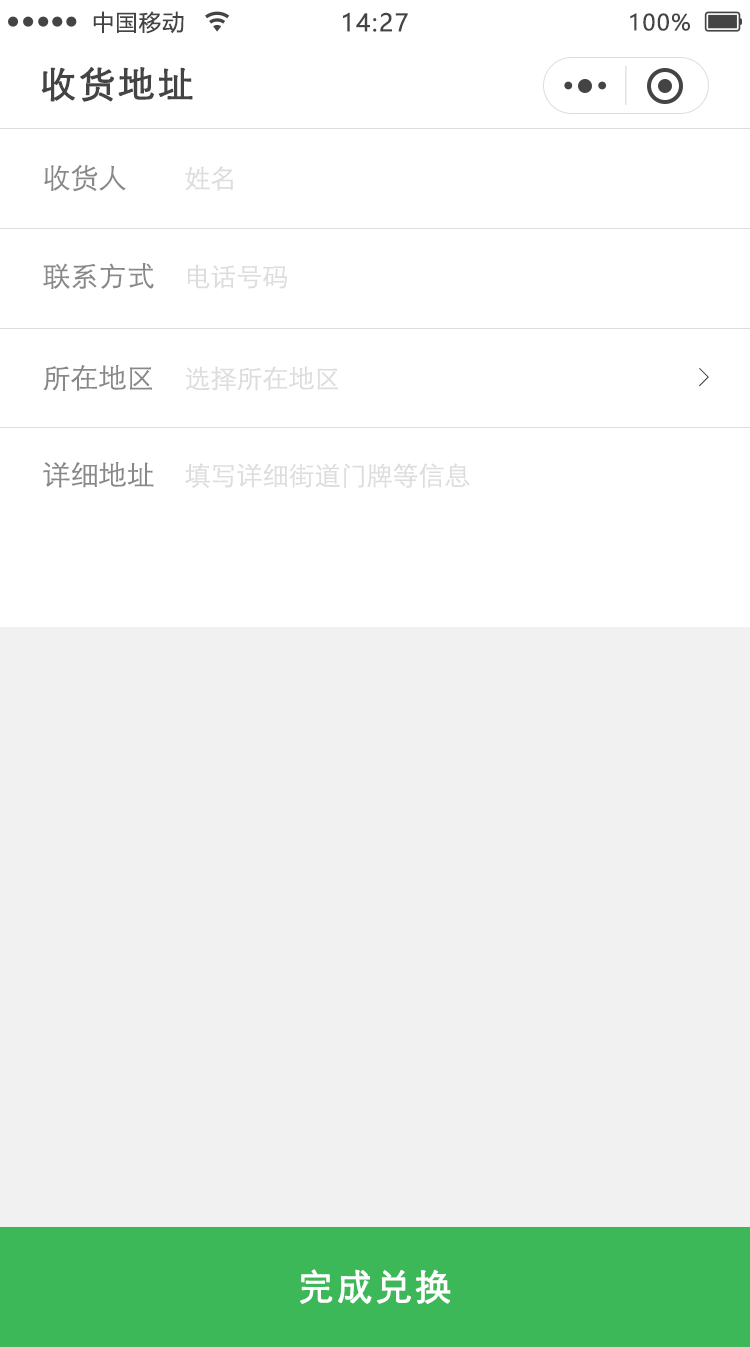
<style>
.page{position:relative;width:750px;height:1347px;background:#ffffff}
.page>*{position:absolute;margin:0}
.t1{font:22px "MicrosoftYaHei";letter-spacing:0.06em;color:#444444}
.t2{font:24px "MicrosoftYaHei";letter-spacing:0.06em;color:#444444}
.t3{font:36px "STXihei";letter-spacing:0.06em;color:#444444;font-weight:bold}
.t4{font:28px "STXihei";color:#888888}
.t5{font:26px "STXihei";color:#dddddd}
.t6{font:26px "SimSun";color:#444444}
.t7{font:36px "STXihei";letter-spacing:0.06em;color:#ffffff;font-weight:bold}
</style>
<div class="page">
<p class="t1" style="left:93px;top:11px;width:91px;height:23px">中国移动</p>
<p class="t2" style="left:343px;top:12px;width:65px;height:20px">14:27</p>
<p class="t1" style="left:630px;top:13px;width:60px;height:18px">100%</p>
<p class="t3" style="left:41px;top:67px;width:152px;height:35px">收货地址</p>
<p class="t4" style="left:44px;top:164px;width:82px;height:28px">收货人</p>
<p class="t5" style="left:185px;top:166px;width:48px;height:25px">姓名</p>
<p class="t4" style="left:43px;top:262px;width:111px;height:27px">联系方式</p>
<p class="t5" style="left:187px;top:264px;width:100px;height:25px">电话号码</p>
<p class="t4" style="left:43px;top:364px;width:109px;height:27px">所在地区</p>
<p class="t5" style="left:185px;top:366px;width:153px;height:25px">选择所在地区</p>
<p class="t6" style="left:699px;top:368px;width:10px;height:19px">&gt;</p>
<p class="t4" style="left:43px;top:462px;width:111px;height:26px">详细地址</p>
<p class="t5" style="left:185px;top:463px;width:285px;height:25px">填写详细街道门牌等信息</p>
<p class="t7" style="left:300px;top:1269px;width:151px;height:36px">完成兑换</p>
</div>
